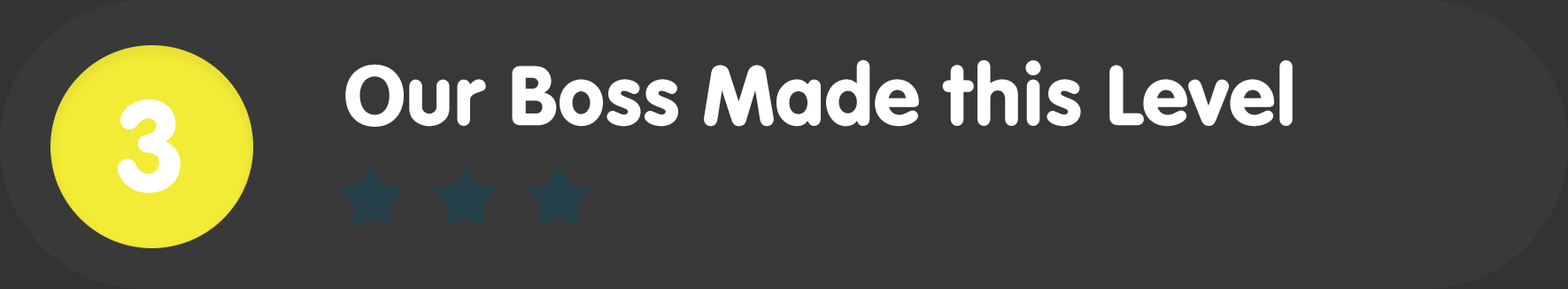
<style>
.page{position:relative;width:1568px;height:289px;background:#393939}
.page>*{position:absolute;margin:0}
.t1{font:88.5px "VAGRundschriftD";color:#ffffff}
.t2{font:132.8px "VAGRundschriftD";color:#ffffff}
</style>
<div class="page">
<p class="t1" style="left:345px;top:59px;width:948px;height:68px">Our Boss Made this Level</p>
<p class="t2" style="left:118px;top:99px;width:63px;height:94px">3</p>
</div>
